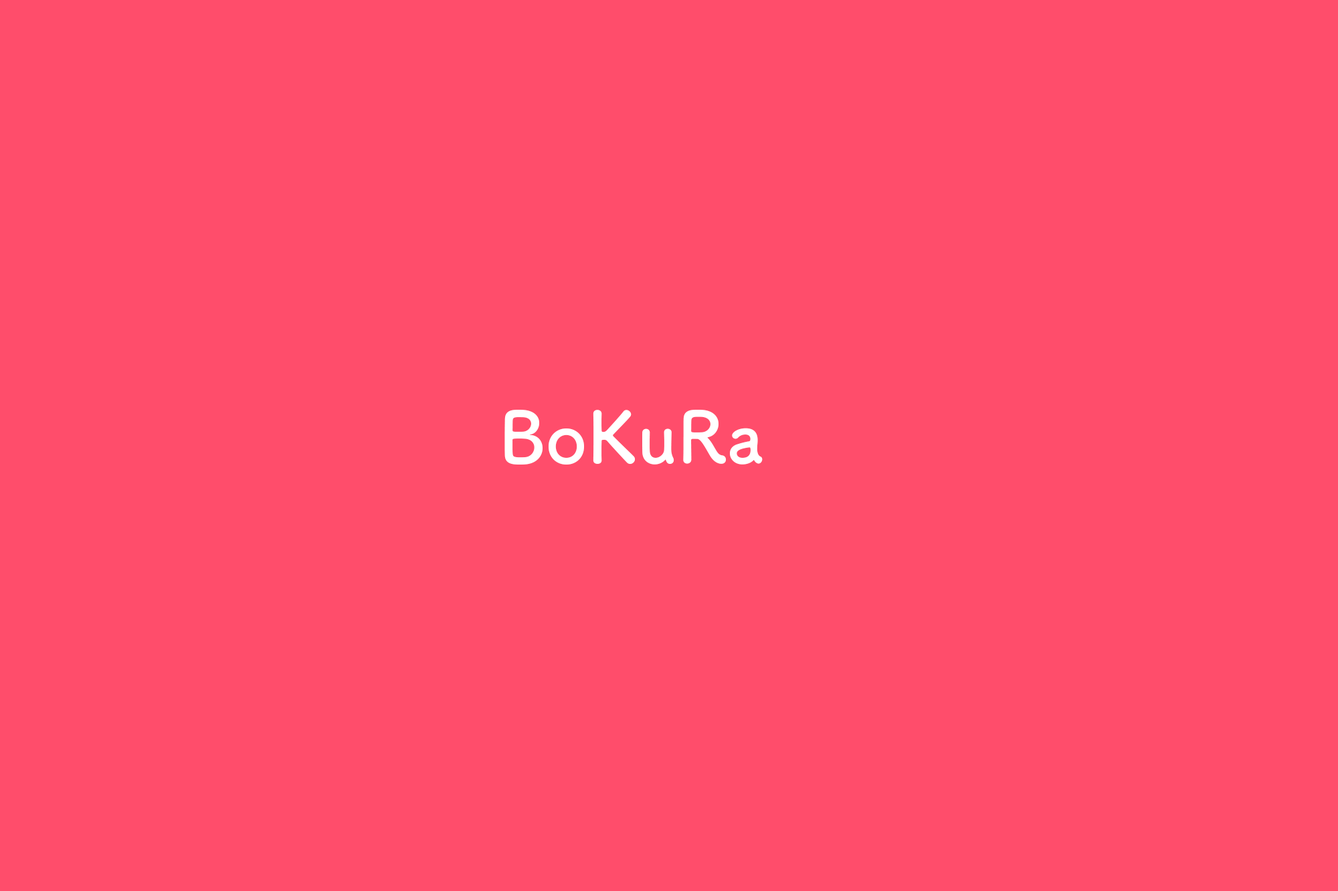
<style>
.page{position:relative;width:1338px;height:891px;background:#ff4d6b}
.page>*{position:absolute;margin:0}
.t1{font:70.9px "TsukuARdGothic-Bold";color:#ffffff}
</style>
<div class="page">
<p class="t1" style="left:504px;top:409px;width:258px;height:56px">BoKuRa</p>
</div>
